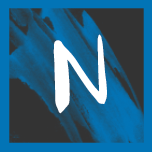
<style>
.page{position:relative;width:152px;height:152px;background:#333333}
.page>*{position:absolute;margin:0}
.t1{font:58.3px "Luna";color:#ffffff}
</style>
<div class="page">
<p class="t1" style="left:53px;top:34px;width:54px;height:80px">N</p>
</div>
